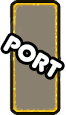
<style>
.page{position:relative;width:66px;height:115px;background:#898070}
.page>*{position:absolute;margin:0}
.t1{font:28.2px "Junegull";color:#ffffff}
</style>
<div class="page">
<p class="t1" style="left:3px;top:35px;width:59px;height:42px;rotate:30deg">PORT</p>
</div>
